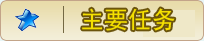
<style>
.page{position:relative;width:204px;height:41px}
.page>*{position:absolute;margin:0}
.t1{font:24px "SimHei";color:#f5e000}
</style>
<div class="page">
<p class="t1" style="left:82px;top:8px;width:93px;height:23px">主要任务</p>
</div>
